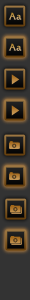
<style>
.page{position:relative;width:30px;height:300px;background:#333333}
.page>*{position:absolute;margin:0}
.t1{font:10px "FrizQuadrata";letter-spacing:0.04em}
</style>
<div class="page">
<p class="t1" style="left:8px;top:12px;width:14px;height:8px">Aa</p>
<p class="t1" style="left:8px;top:43px;width:14px;height:8px">Aa</p>
</div>
